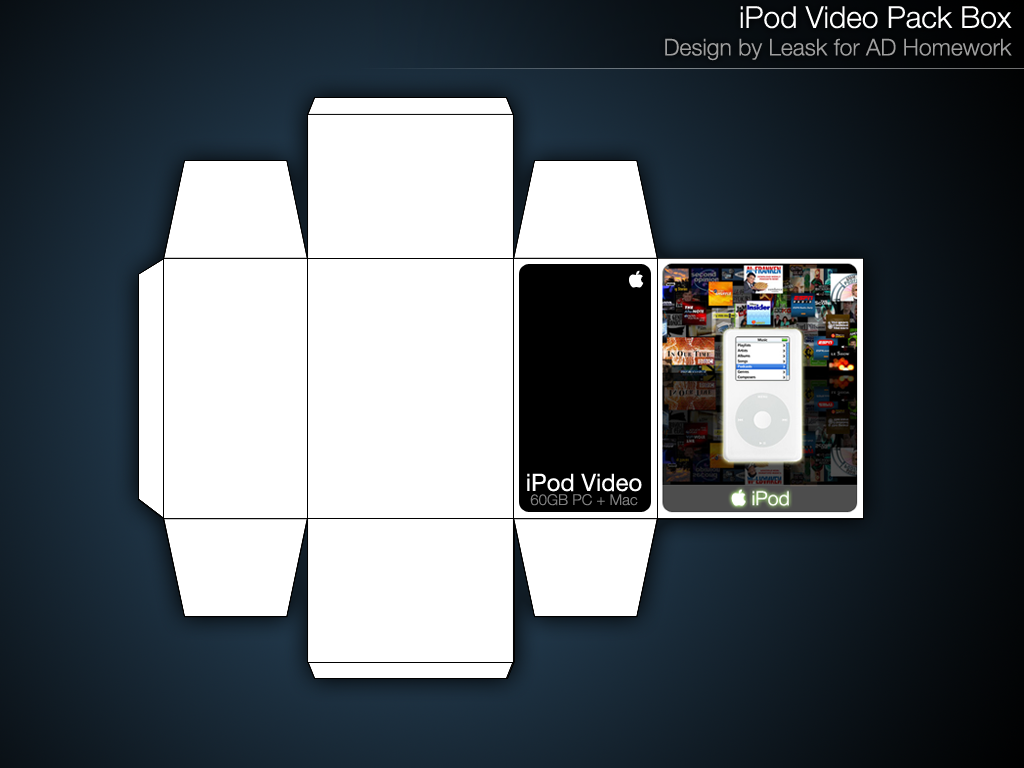
<style>
.page{position:relative;width:1024px;height:768px;background:#ffffff}
.page>*{position:absolute;margin:0}
.t1{font:23px "HelveticaNeue-Light";color:#9e9e9e}
.t2{font:30px "HelveticaNeue-Light";color:#ffffff}
</style>
<div class="page">
<p class="t1" style="left:665px;top:6px;width:347px;height:55px;text-align:right"><span class="t2">iPod Video Pack Box<br></span>Design by Leask for AD Homework</p>
</div>
